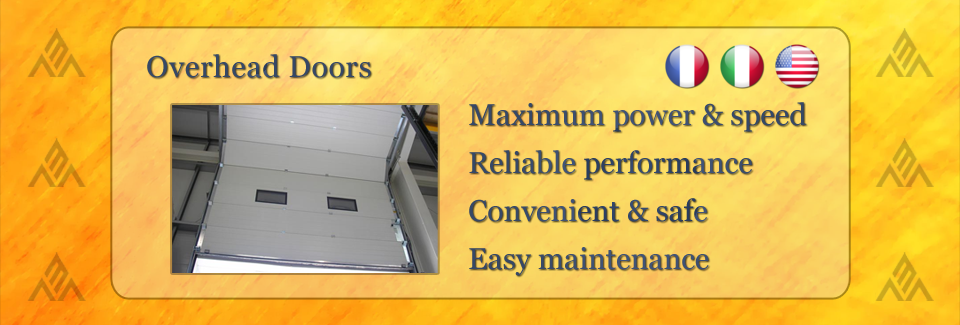
<style>
.page{position:relative;width:960px;height:325px}
.page>*{position:absolute;margin:0}
.t1{font:30px "Georgia";letter-spacing:0.025em;color:#364866}
.t2{font:30px/48px "Georgia";color:#37496a}
</style>
<div class="page">
<p class="t1" style="left:147px;top:54px;width:224px;height:24px">Overhead Doors</p>
<p class="t2" style="left:469px;top:102px;width:338px;height:174px">Maximum power &amp; speed<br>Reliable performance<br>Convenient &amp; safe<br>Easy maintenance</p>
</div>
